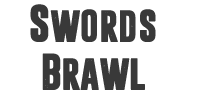
<style>
.page{position:relative;width:200px;height:100px;background:#ffffff}
.page>*{position:absolute;margin:0}
.t1{font:40px "Dreamwalker";color:#393939;scale:1.1 1}
</style>
<div class="page">
<p class="t1" style="left:30px;top:4px;width:126px;height:86px;text-align:center">Swords<br>Brawl</p>
</div>
